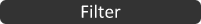
<style>
.page{position:relative;width:201px;height:24px;background:#333333}
.page>*{position:absolute;margin:0}
.t1{font:19.2px "Calibri";color:#ffffff}
</style>
<div class="page">
<p class="t1" style="left:81px;top:4px;width:40px;height:14px">Filter</p>
</div>
